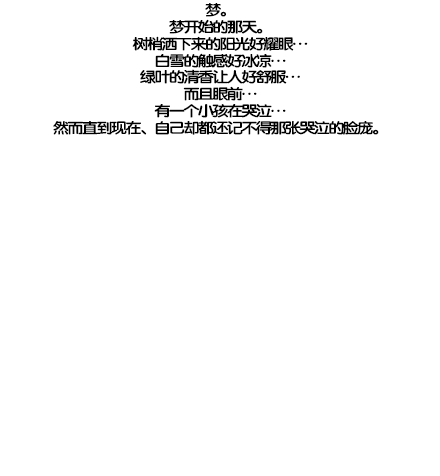
<style>
.page{position:relative;width:440px;height:476px;background:#ffffff}
.page>*{position:absolute;margin:0}
.t1{font:14.7px/16.8px "FZY4K--GBK1-0";letter-spacing:-0.13em;color:#000000;scale:1.14 1}
</style>
<div class="page">
<p class="t1" style="left:53px;top:3px;width:326px;height:132px;text-align:center">梦。<br>梦开始的那天。<br>树梢洒下来的阳光好耀眼…<br>白雪的触感好冰凉…<br>绿叶的清香让人好舒服…<br>而且眼前…<br>有一个小孩在哭泣…<br>然而直到现在、自己却都还记不得那张哭泣的脸庞。</p>
</div>
